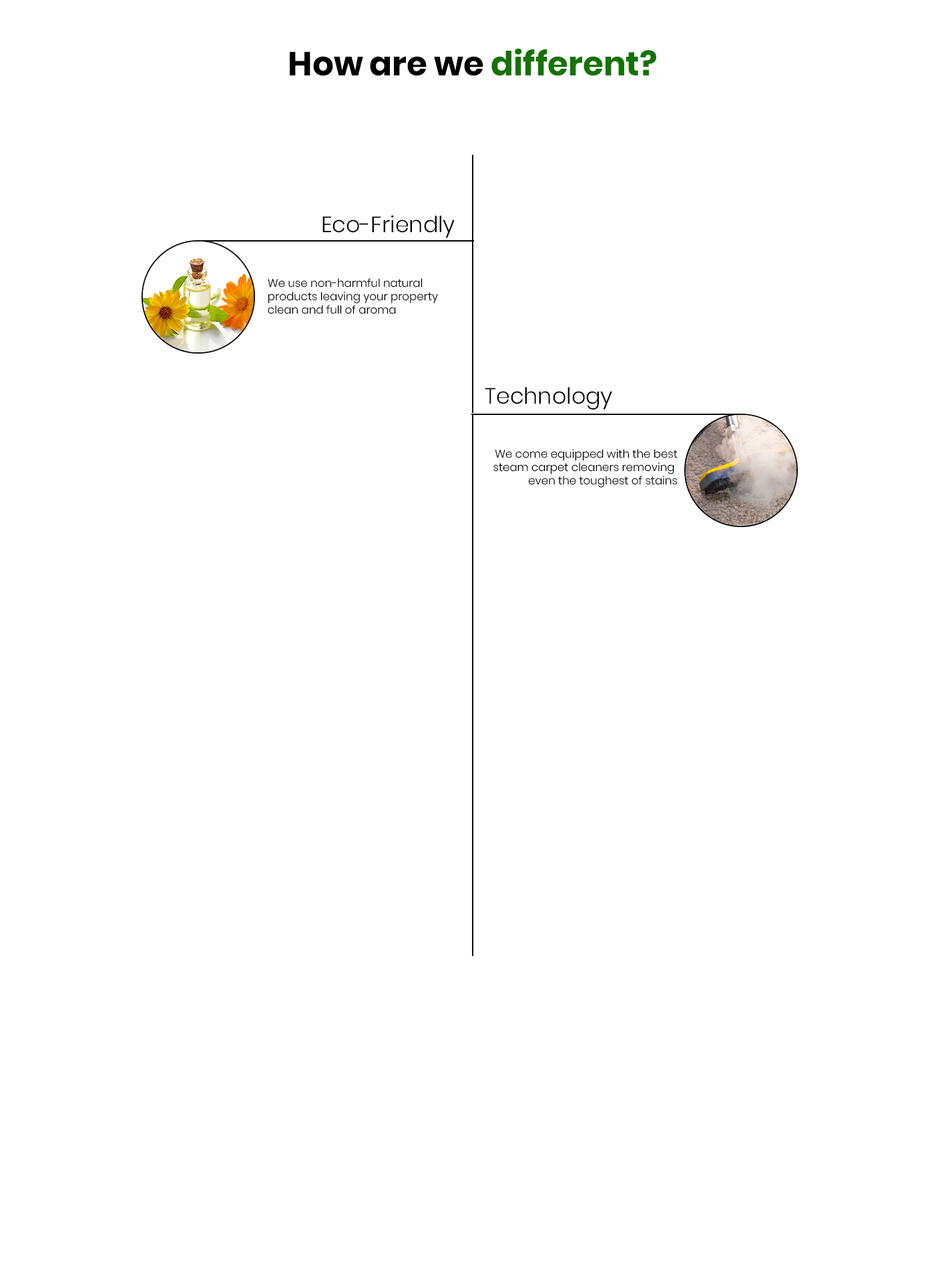
<style>
.page{position:relative;width:946px;height:1261px;background:#ffffff}
.page>*{position:absolute;margin:0}
.t1{font:8px "Poppins-Bold";color:#000000}
.t2{font:8px "Poppins-Bold";color:#157300}
.t3{font:22.2px "Poppins-Light";color:#000000}
.t4{font:11.1px "Poppins-Light";color:#000000}
</style>
<div class="page">
<p class="t1" style="left:290px;top:48px;width:366px;height:28px;text-align:center">How are we <span class="t2">different?</span></p>
<p class="t3" style="left:322px;top:215px;width:132px;height:23px">Eco-Friendly</p>
<p class="t4" style="left:268px;top:278px;width:170px;height:36px">We use non-harmful natural<br>products leaving your property<br>clean and full of aroma</p>
<p class="t3" style="left:484px;top:387px;width:128px;height:23px">Technology</p>
<p class="t4" style="left:493px;top:449px;width:184px;height:39px;text-align:right">We come equipped with the best<br> steam carpet cleaners removing <br>even the toughest of stains</p>
</div>
